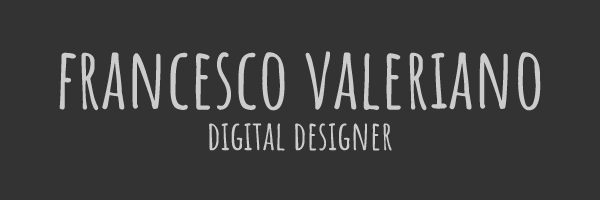
<style>
.page{position:relative;width:600px;height:200px;background:#333333}
.page>*{position:absolute;margin:0}
.t1{font:84px "AmaticSC-Bold";color:#cccccc}
.t2{font:40px "AmaticSC-Bold";color:#cccccc}
</style>
<div class="page">
<p class="t1" style="left:59px;top:51px;width:482px;height:60px">francesco valeriano</p>
<p class="t2" style="left:209px;top:123px;width:183px;height:28px">digital designer</p>
</div>
